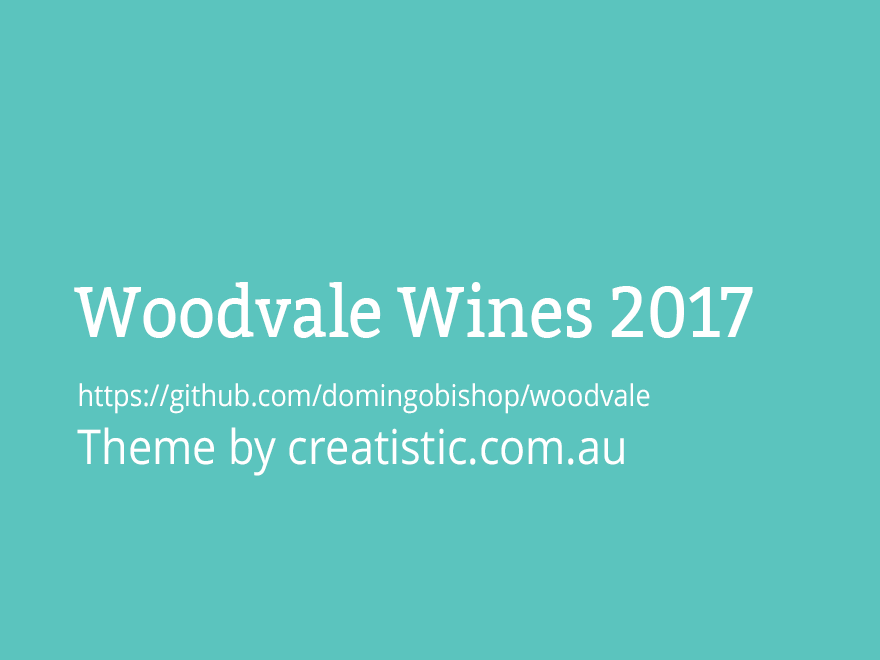
<style>
.page{position:relative;width:880px;height:660px;background:#5bc4be}
.page>*{position:absolute;margin:0}
.t1{font:72px "Bitter-Regular";color:#ffffff;scale:0.9 1}
.t2{font:30px "OpenSans";color:#ffffff;scale:0.9 1}
.t3{font:48px "OpenSans";color:#ffffff;scale:0.9 1}
</style>
<div class="page">
<p class="t1" style="left:74px;top:282px;width:679px;height:56px">Woodvale Wines 2017</p>
<p class="t2" style="left:77px;top:383px;width:573px;height:93px">https://github.com/domingobishop/woodvale<br><span class="t3">Theme by creatistic.com.au</span></p>
</div>
